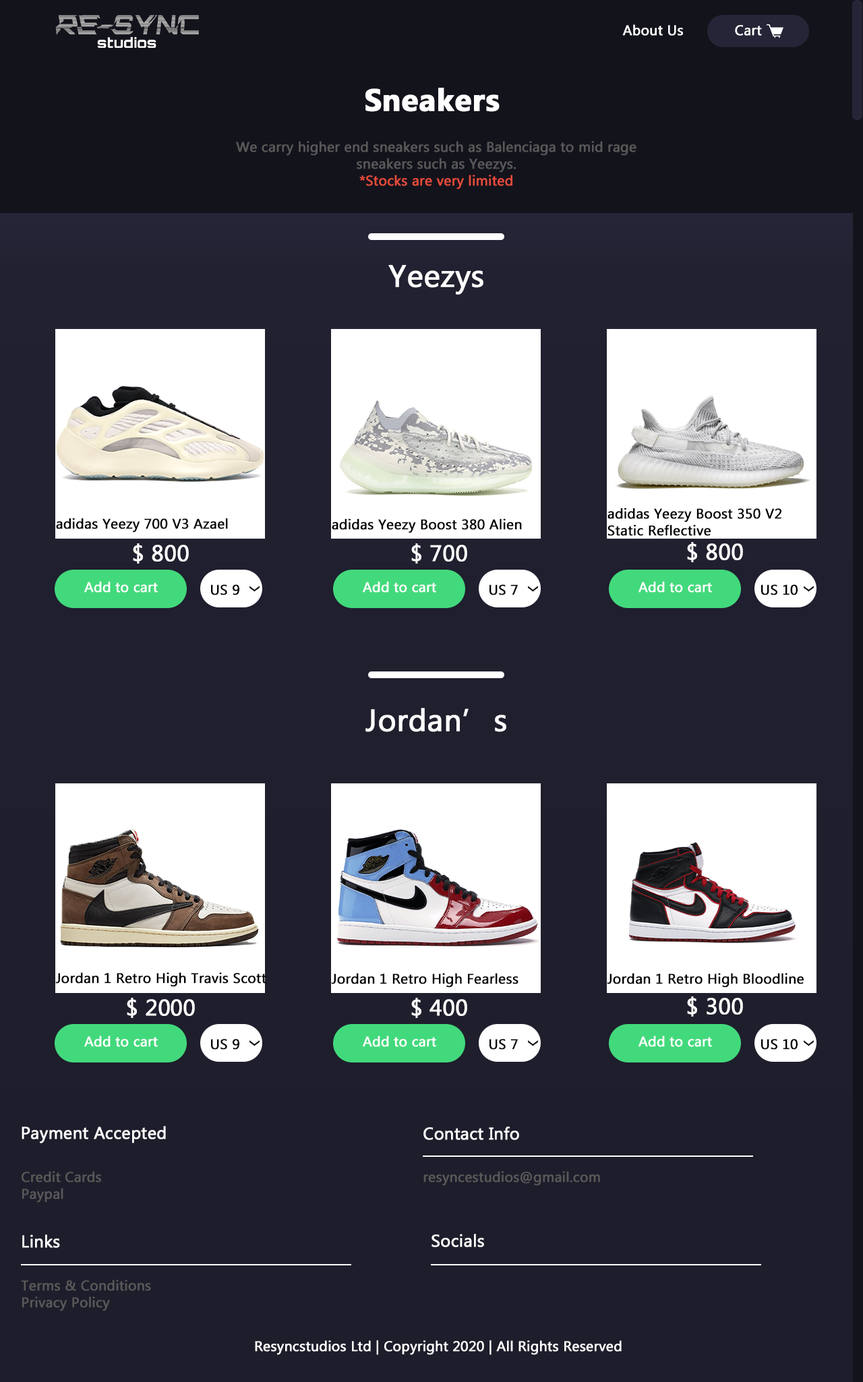
<style>
.page{position:relative;width:863px;height:1382px}
.page>*{position:absolute;margin:0}
.t1{font:14px "MicrosoftTaiLe";color:#ffffff;font-weight:bold}
.t2{font:30.9px "MicrosoftTaiLe-Bold";color:#ffffff;font-weight:bold}
.t3{font:14px "MicrosoftTaiLe";color:#595959;font-weight:bold}
.t4{font:14px "MicrosoftTaiLe";color:#e64c3c;font-weight:bold}
.t5{font:30.9px "MicrosoftTaiLe";color:#ffffff;font-weight:bold}
.t6{font:14px "MicrosoftTaiLe";color:#000000;font-weight:bold}
.t7{font:22.5px "MicrosoftTaiLe";color:#ffffff;font-weight:bold}
.t8{font:16.9px "MicrosoftTaiLe";color:#ffffff;font-weight:bold}
</style>
<div class="page">
<p class="t1" style="left:622px;top:24px;width:61px;height:12px">About Us</p>
<p class="t1" style="left:735px;top:25px;width:27px;height:11px">Cart</p>
<p class="t2" style="left:365px;top:88px;width:135px;height:24px">Sneakers</p>
<p class="t3" style="left:236px;top:141px;width:400px;height:48px;text-align:center">We carry higher end sneakers such as Balenciaga to mid rage sneakers such as Yeezys.<br><span class="t4">*Stocks are very limited</span></p>
<p class="t5" style="left:388px;top:265px;width:95px;height:30px">Yeezys</p>
<p class="t6" style="left:607px;top:508px;width:174px;height:28px">adidas Yeezy Boost 350 V2 Static Reflective</p>
<p class="t6" style="left:56px;top:518px;width:172px;height:15px">adidas Yeezy 700 V3 Azael</p>
<p class="t6" style="left:332px;top:518px;width:190px;height:15px">adidas Yeezy Boost 380 Alien</p>
<p class="t7" style="left:133px;top:543px;width:56px;height:21px">$ 800</p>
<p class="t7" style="left:411px;top:543px;width:56px;height:21px">$ 700</p>
<p class="t7" style="left:687px;top:542px;width:56px;height:20px">$ 800</p>
<p class="t1" style="left:84px;top:581px;width:74px;height:12px">Add to cart</p>
<p class="t1" style="left:363px;top:581px;width:73px;height:12px">Add to cart</p>
<p class="t1" style="left:638px;top:581px;width:74px;height:12px">Add to cart</p>
<p class="t6" style="left:211px;top:584px;width:28px;height:11px">US 9</p>
<p class="t6" style="left:489px;top:584px;width:29px;height:11px">US 7</p>
<p class="t6" style="left:761px;top:584px;width:36px;height:11px">US 10</p>
<p class="t5" style="left:365px;top:708px;width:141px;height:24px">Jordan’s</p>
<p class="t6" style="left:55px;top:972px;width:211px;height:15px">Jordan 1 Retro High Travis Scott</p>
<p class="t6" style="left:331px;top:973px;width:187px;height:15px">Jordan 1 Retro High Fearless</p>
<p class="t6" style="left:607px;top:973px;width:197px;height:15px">Jordan 1 Retro High Bloodline</p>
<p class="t7" style="left:127px;top:998px;width:68px;height:20px">$ 2000</p>
<p class="t7" style="left:411px;top:998px;width:56px;height:20px">$ 400</p>
<p class="t7" style="left:687px;top:996px;width:56px;height:21px">$ 300</p>
<p class="t1" style="left:84px;top:1035px;width:74px;height:12px">Add to cart</p>
<p class="t1" style="left:363px;top:1035px;width:73px;height:12px">Add to cart</p>
<p class="t1" style="left:638px;top:1035px;width:74px;height:12px">Add to cart</p>
<p class="t6" style="left:211px;top:1039px;width:28px;height:11px">US 9</p>
<p class="t6" style="left:489px;top:1039px;width:29px;height:11px">US 7</p>
<p class="t6" style="left:761px;top:1039px;width:36px;height:11px">US 10</p>
<p class="t8" style="left:22px;top:1126px;width:144px;height:17px">Payment Accepted</p>
<p class="t8" style="left:423px;top:1126px;width:96px;height:14px">Contact Info</p>
<p class="t3" style="left:22px;top:1171px;width:79px;height:32px">Credit Cards<br>Paypal</p>
<p class="t3" style="left:423px;top:1171px;width:177px;height:15px">resyncestudios@gmail.com</p>
<p class="t8" style="left:22px;top:1234px;width:38px;height:14px">Links</p>
<p class="t8" style="left:431px;top:1234px;width:53px;height:13px">Socials</p>
<p class="t3" style="left:21px;top:1279px;width:130px;height:32px">Terms &amp; Conditions<br>Privacy Policy</p>
<p class="t1" style="left:255px;top:1340px;width:367px;height:15px">Resyncstudios Ltd | Copyright 2020 | All Rights Reserved</p>
</div>
